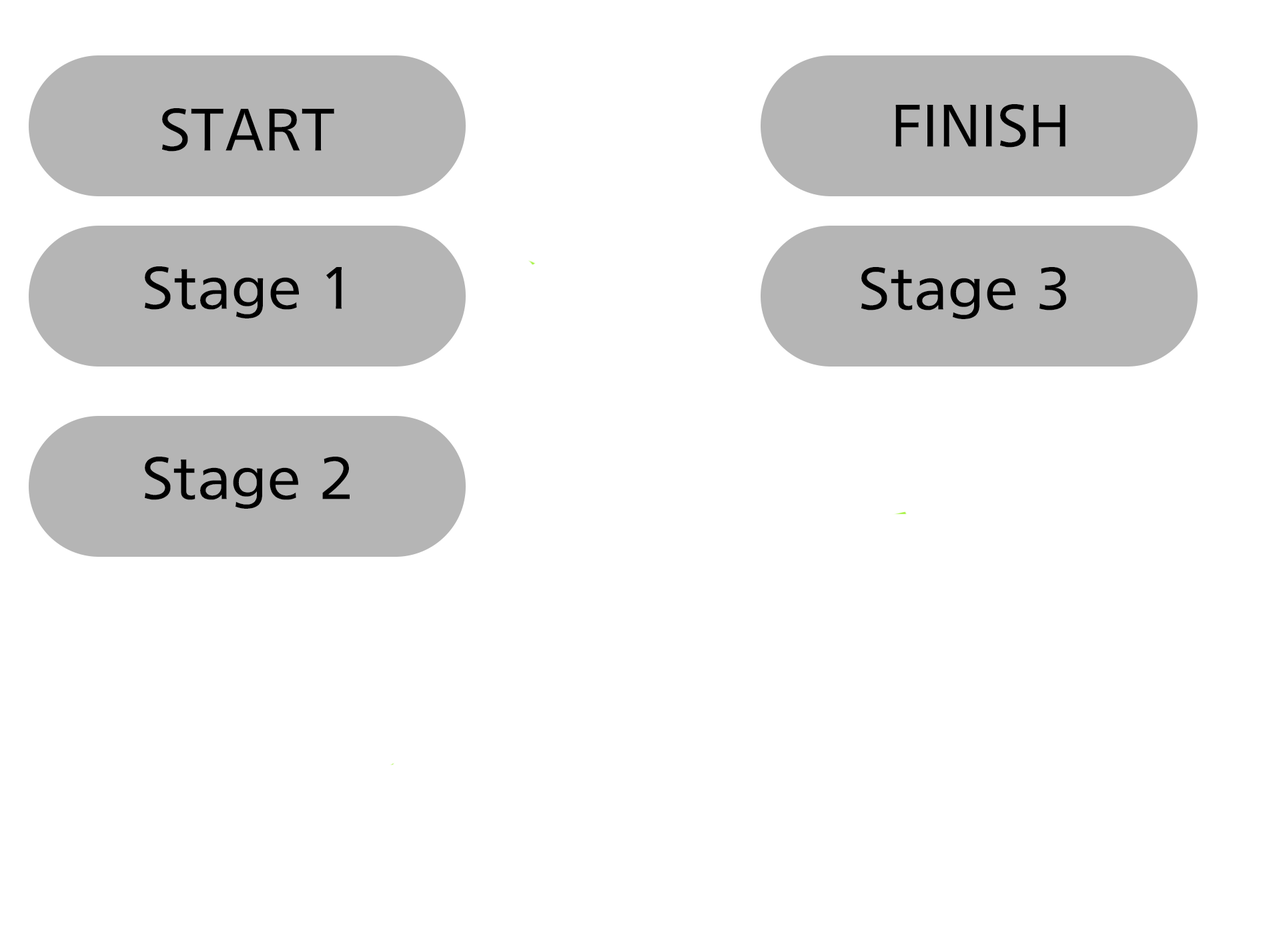
<style>
.page{position:relative;width:1261px;height:946px;background:#ffffff}
.page>*{position:absolute;margin:0}
.t1{font:60.4px "THELuxGoM";color:#000000}
.t2{font:60.4px "THELuxGoM";color:#1e7e49}
</style>
<div class="page">
<p class="t1" style="left:162px;top:108px;width:172px;height:43px"><span class="t2"><br></span>START</p>
<p class="t1" style="left:895px;top:104px;width:171px;height:43px"><span class="t2"><br></span>FINISH</p>
<p class="t1" style="left:145px;top:266px;width:197px;height:52px">Stage 1</p>
<p class="t1" style="left:861px;top:267px;width:205px;height:52px">Stage 3</p>
<p class="t1" style="left:145px;top:456px;width:205px;height:52px">Stage 2</p>
</div>
